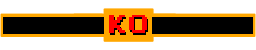
<style>
.page{position:relative;width:256px;height:50px;background:#ffffff}
.page>*{position:absolute;margin:0}
.t1{font:21.3px "MegaMan-2";letter-spacing:0.075em;color:#ff0000}
.t2{font:21.3px "MegaMan-2";letter-spacing:0.075em}
</style>
<div class="page">
<p class="t1" style="left:109px;top:15px;width:38px;height:18px">KO</p>
<p class="t2" style="left:110px;top:17px;width:38px;height:18px">KO</p>
</div>
